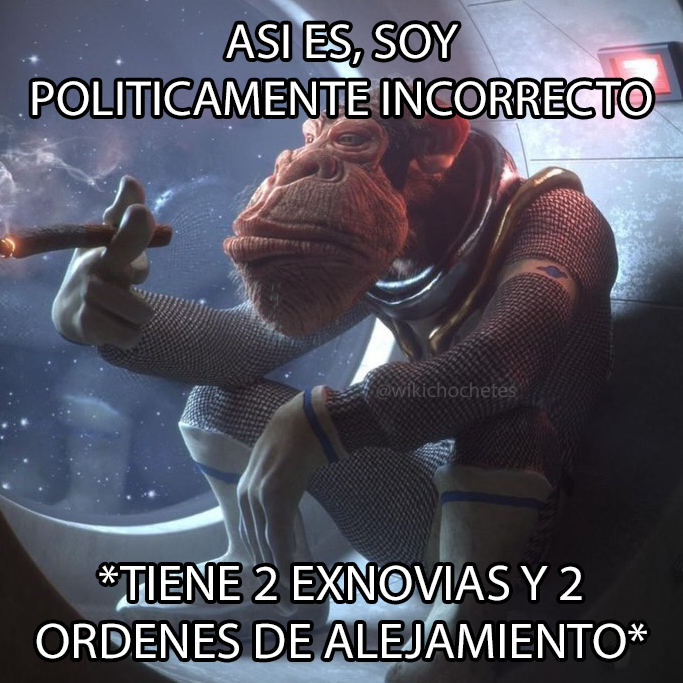
<style>
.page{position:relative;width:683px;height:683px}
.page>*{position:absolute;margin:0}
.t1{font:49.2px "MyriadPro-Regular";color:#ffffff}
.t2{font:20.9px "MyriadPro-Regular";color:#4c484c}
.t3{font:50.5px "MyriadPro-Regular";color:#ffffff}
</style>
<div class="page">
<p class="t1" style="left:32px;top:24px;width:620px;height:92px;text-align:center">ASI ES, SOY<br>POLITICAMENTE INCORRECTO</p>
<p class="t2" style="left:376px;top:382px;width:140px;height:18px">@wikichochetes</p>
<p class="t3" style="left:36px;top:565px;width:611px;height:94px;text-align:center">*TIENE 2 EXNOVIAS Y 2<br>ORDENES DE ALEJAMIENTO*</p>
</div>
